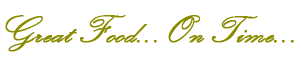
<style>
.page{position:relative;width:301px;height:65px;background:#ffffff}
.page>*{position:absolute;margin:0}
.t1{font:38.9px "KunstlerScript";color:#8b8b00;font-weight:bold;scale:0.96 1}
</style>
<div class="page">
<p class="t1" style="left:5px;top:15px;width:289px;height:37px">Great Food...On Time...</p>
</div>
